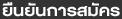
<style>
.page{position:relative;width:122px;height:19px;background:#333333}
.page>*{position:absolute;margin:0}
.t1{font:23.5px "DBHelvethaicaX-BdExt";color:#ffffff}
</style>
<div class="page">
<p class="t1" style="left:2px;top:2px;width:118px;height:15px">ยืนยันการสมัคร</p>
</div>
